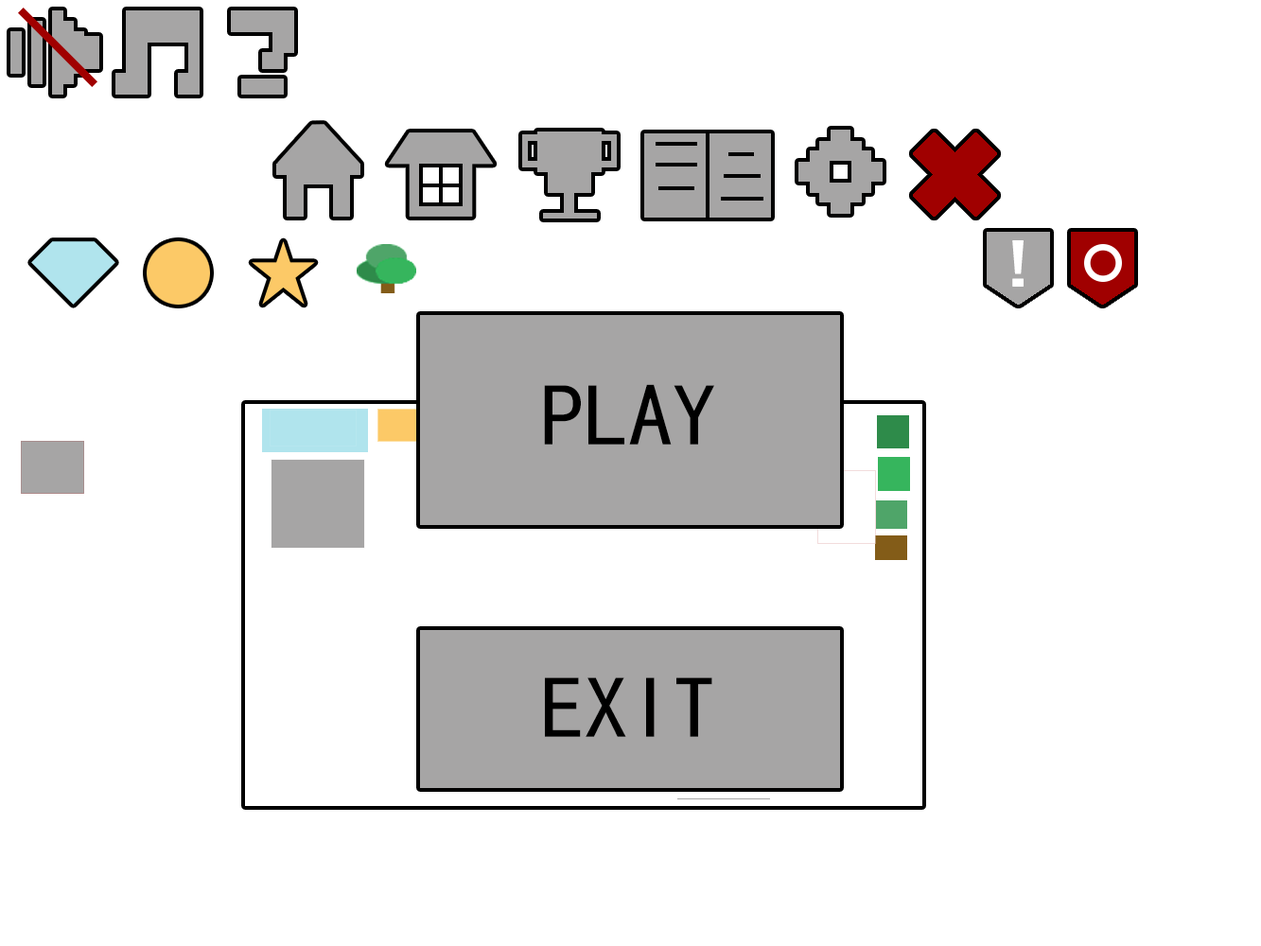
<style>
.page{position:relative;width:1261px;height:946px;background:#ffffff}
.page>*{position:absolute;margin:0}
.t1{font:88.3px "SimHei";color:#000000}
</style>
<div class="page">
<p class="t1" style="left:544px;top:384px;width:170px;height:61px">PLAY</p>
<p class="t1" style="left:545px;top:677px;width:167px;height:60px">EXIT</p>
</div>
